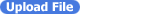
<style>
.page{position:relative;width:150px;height:14px;background:#ffffff}
.page>*{position:absolute;margin:0}
.t1{font:12px "Tahoma-Bold";color:#ffffff}
</style>
<div class="page">
<p class="t1" style="left:6px;top:2px;width:67px;height:12px">Upload File</p>
</div>
